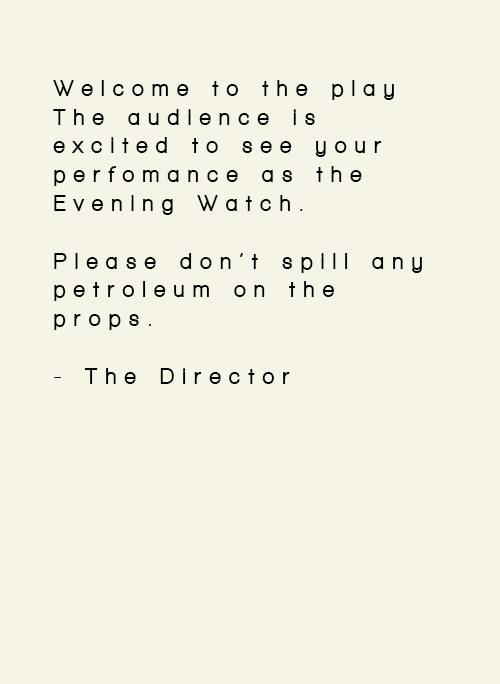
<style>
.page{position:relative;width:500px;height:684px;background:#f5f4e7}
.page>*{position:absolute;margin:0}
.t1{font:24px "WalkwayBlack";letter-spacing:0.46em;color:#000000;scale:0.82 1}
</style>
<div class="page">
<p class="t1" style="left:53px;top:80px;width:369px;height:304px">Welcome to the play The audience is excited to see your perfomance as the Evening Watch.<br><br>Please don’t spill any petroleum on the props.<br><br>- The Director</p>
</div>
